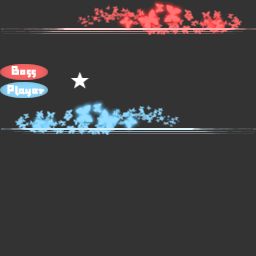
<style>
.page{position:relative;width:256px;height:256px;background:#333333}
.page>*{position:absolute;margin:0}
.t1{font:18px "AaFKH";color:#ffffff}
</style>
<div class="page">
<p class="t1" style="left:11px;top:66px;width:25px;height:12px">Boss</p>
<p class="t1" style="left:7px;top:85px;width:38px;height:12px">Player</p>
</div>
